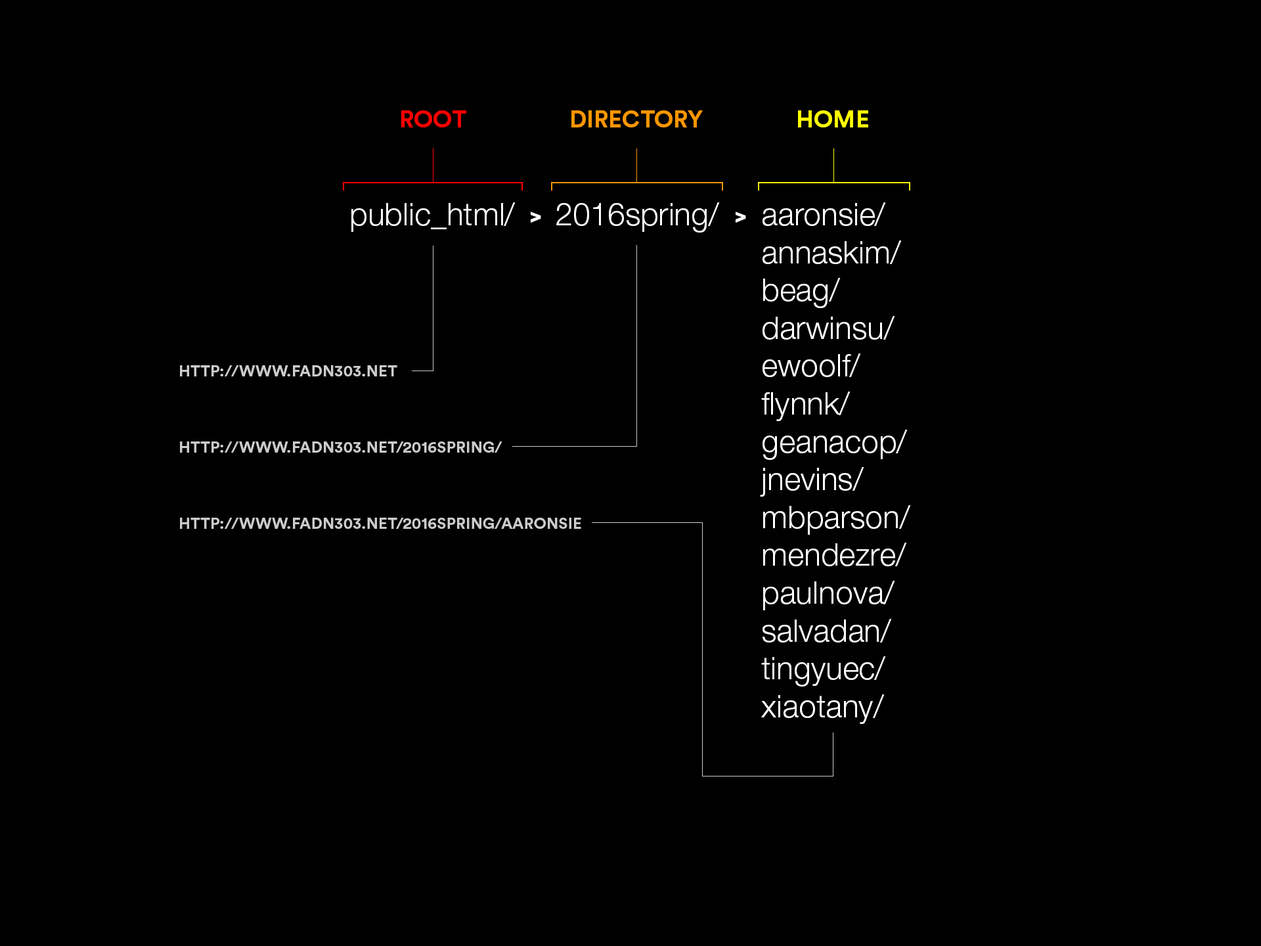
<style>
.page{position:relative;width:1261px;height:946px;background:#000000}
.page>*{position:absolute;margin:0}
.t1{font:23.6px "CircularStd-Bold";color:#ff0000;text-transform:uppercase}
.t2{font:23.6px "CircularStd-Bold";color:#ff9600;text-transform:uppercase}
.t3{font:23.6px "CircularStd-Bold";color:#ffff00;text-transform:uppercase}
.t4{font:31.5px "HelveticaNeueLTStd-Lt";color:#ffffff}
.t5{font:19.7px "HelveticaNeueLTStd-Hv";color:#ffffff}
.t6{font:15.8px "CircularStd-Bold";color:#cccccc;text-transform:uppercase}
</style>
<div class="page">
<p class="t1" style="left:401px;top:110px;width:65px;height:17px">ROOT</p>
<p class="t2" style="left:571px;top:110px;width:132px;height:17px">DIRECTORY</p>
<p class="t3" style="left:798px;top:110px;width:70px;height:17px">HOME</p>
<p class="t4" style="left:351px;top:202px;width:165px;height:30px">public_html/</p>
<p class="t4" style="left:556px;top:202px;width:164px;height:30px">2016spring/</p>
<p class="t4" style="left:760px;top:202px;width:151px;height:522px">aaronsie/<br>annaskim/<br>beag/<br>darwinsu/<br>ewoolf/<br>flynnk/<br>geanacop/<br>jnevins/<br>mbparson/<br>mendezre/<br>paulnova/<br>salvadan/<br>tingyuec/<br>xiaotany/</p>
<p class="t5" style="left:531px;top:211px;width:10px;height:12px">&gt;</p>
<p class="t5" style="left:736px;top:211px;width:10px;height:12px">&gt;</p>
<p class="t6" style="left:180px;top:365px;width:217px;height:11px">http://www.fadn303.net</p>
<p class="t6" style="left:180px;top:441px;width:322px;height:11px">http://www.fadn303.net/2016spring/</p>
<p class="t6" style="left:180px;top:518px;width:401px;height:11px">http://www.fadn303.net/2016spring/aaronsie</p>
</div>
